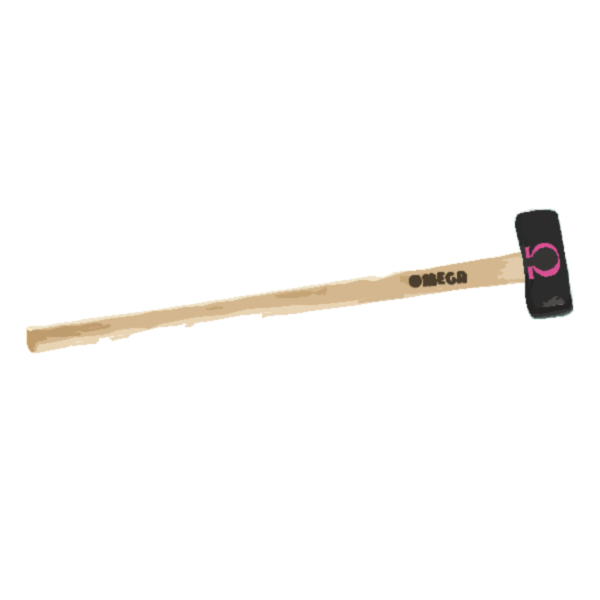
<style>
.page{position:relative;width:600px;height:600px;background:#ffffff}
.page>*{position:absolute;margin:0}
.t1{font:18px "Bauhaus93";color:#4d3f2d}
</style>
<div class="page">
<p class="t1" style="left:409px;top:271px;width:58px;height:17px;rotate:-5deg">OMEGA</p>
</div>
